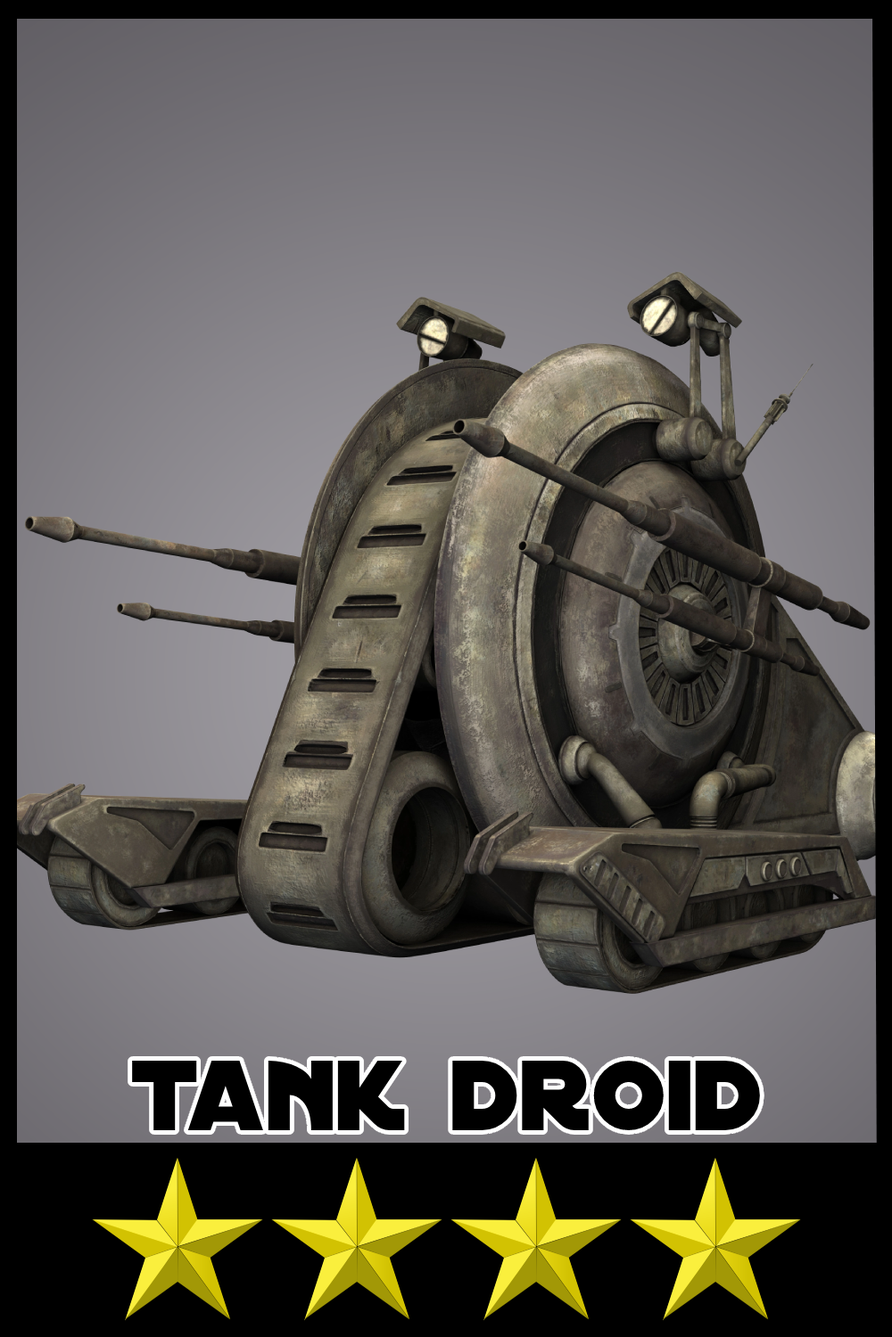
<style>
.page{position:relative;width:892px;height:1337px}
.page>*{position:absolute;margin:0}
.t1{font:107px "DistantGalaxy";color:#000000}
</style>
<div class="page">
<p class="t1" style="left:132px;top:1061px;width:628px;height:70px">tank droid</p>
</div>
